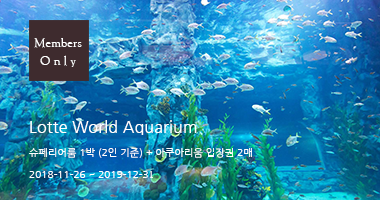
<style>
.page{position:relative;width:380px;height:200px}
.page>*{position:absolute;margin:0}
.t1{font:12.4px/17.4px "GoudyOlSt-BT";letter-spacing:0.01em;color:#ffffff}
.t2{font:10px/24px "NanumGothic";letter-spacing:0.01em;color:#ffffff}
.t3{font:16px/24px "NanumGothic";letter-spacing:0.01em;color:#ffffff}
.t4{font:10px/22px "NanumGothic";letter-spacing:0.01em;color:#ffffff}
.t5{font:10px/22px "GoudyOlSt-BT";letter-spacing:0.01em;color:#ffffff}
</style>
<div class="page">
<p class="t1" style="left:34px;top:38px;width:48px;height:29px;text-align:center">Members<br>O n l y</p>
<p class="t2" style="left:29px;top:120px;width:223px;height:58px"><span class="t3">Lotte World Aquarium<br></span>슈페리어룸 1박 (2인 기준) + 아쿠아리움 입장권 2매<br><span class="t4">2018-11-26 ~ 2019-12-3</span><span class="t5">1</span></p>
</div>
